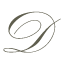
<style>
.page{position:relative;width:64px;height:64px;background:#ffffff}
.page>*{position:absolute;margin:0}
.t1{font:60px "KunstlerScript";color:#5f5e4e}
</style>
<div class="page">
<p class="t1" style="left:3px;top:11px;width:58px;height:42px">D</p>
</div>
